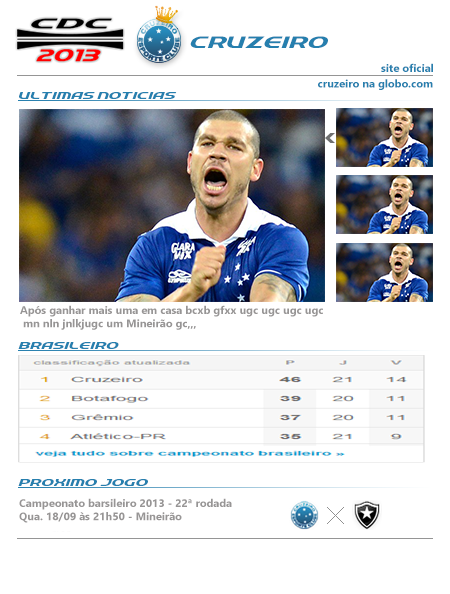
<style>
.page{position:relative;width:450px;height:594px;background:#ffffff}
.page>*{position:absolute;margin:0}
.t1{font:18px "QuickExpress";color:#267fae}
.t2{font:11px "Ebrima-Bold";color:#267fae}
.t3{font:11px "QuickExpress";color:#267fae}
.t4{font:11px "Ebrima-Bold";color:#979595}
</style>
<div class="page">
<p class="t1" style="left:190px;top:36px;width:138px;height:12px">CRUZEIRO</p>
<p class="t2" style="left:381px;top:63px;width:52px;height:9px">site oficial</p>
<p class="t2" style="left:318px;top:79px;width:115px;height:11px">cruzeiro na globo.com</p>
<p class="t3" style="left:19px;top:92px;width:158px;height:7px">ULTIMAS NOTICIAS</p>
<p class="t4" style="left:20px;top:305px;width:303px;height:25px;text-align:right">Após ganhar mais uma em casa bcxb gfxx ugc ugc ugc ugc<br>,,,mn nln jnlkjugc um Mineirão gc</p>
<p class="t3" style="left:18px;top:342px;width:101px;height:7px">BRASILEIRO</p>
<p class="t3" style="left:18px;top:479px;width:130px;height:7px">PROXIMO JOGO</p>
<p class="t4" style="left:19px;top:498px;width:213px;height:25px;text-align:right">Campeonato barsileiro 2013 - 22ª rodada<br>Qua. 18/09 às 21h50 - Mineirão</p>
</div>
